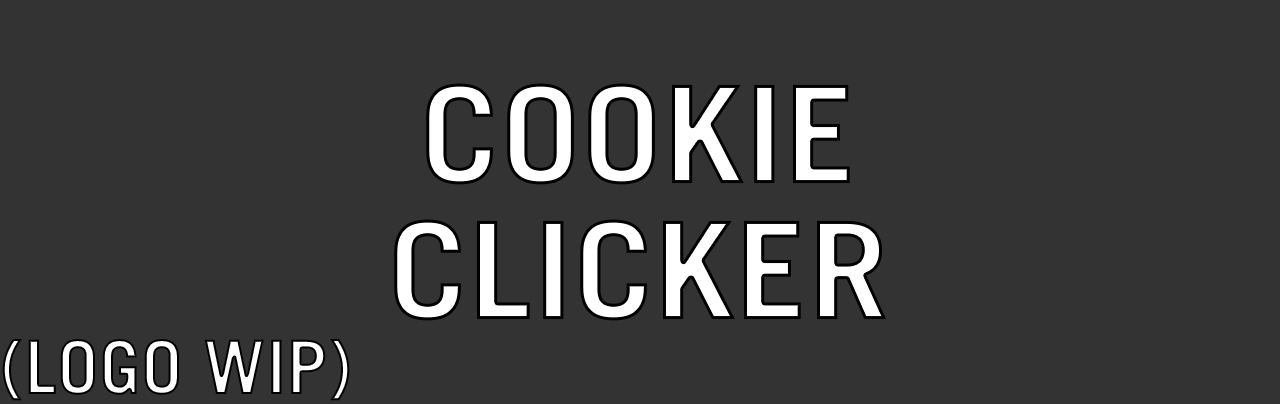
<style>
.page{position:relative;width:1280px;height:404px;background:#333333}
.page>*{position:absolute;margin:0}
.t1{font:135.8px/135.8px "TradeGothic-Bold";color:#ffffff;scale:1.07 1}
.t2{font:75px "TradeGothic-Bold"}
</style>
<div class="page">
<p class="t1" style="left:394px;top:83px;width:492px;height:238px;text-align:center">COOKIE<br>CLICKER</p>
<p class="t2" style="left:2px;top:339px;width:348px;height:62px">(LOGO WIP)</p>
</div>
